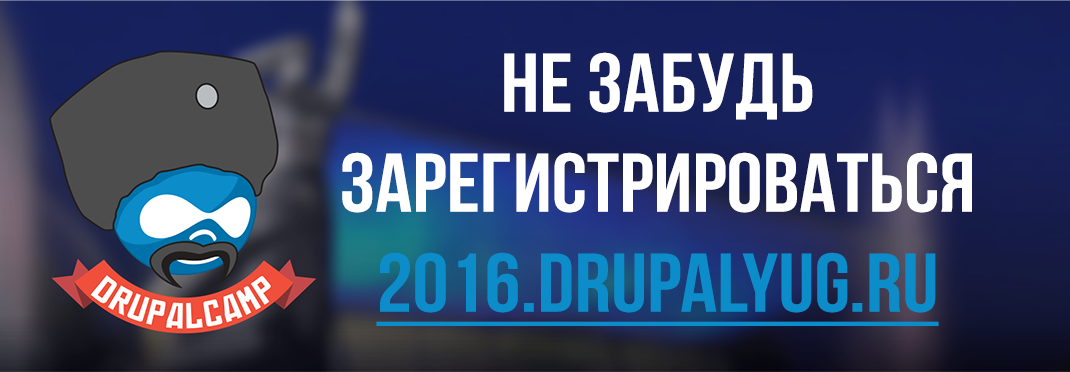
<style>
.page{position:relative;width:1070px;height:372px}
.page>*{position:absolute;margin:0}
.t1{font:83.3px "BebasNeueBold";color:#ffffff;scale:1.09 1}
.t2{font:83.3px "BebasNeueBold";color:#0c8cc8;text-decoration:underline;scale:1.09 1}
</style>
<div class="page">
<p class="t1" style="left:342px;top:52px;width:630px;height:274px;text-align:center">не забудь зарегистрироваться<br><span class="t2">2016.drupalyug.ru</span></p>
</div>
